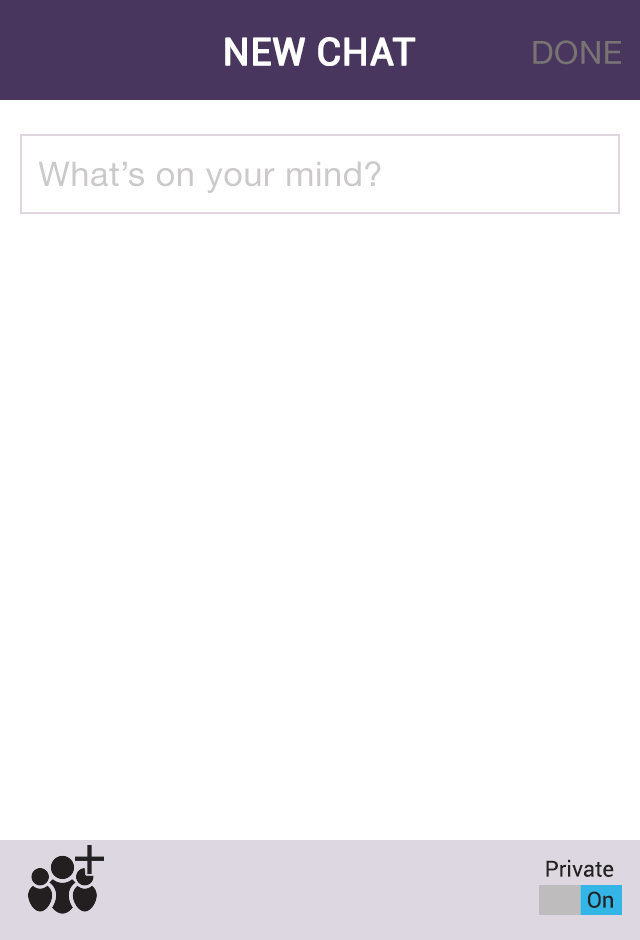
<style>
.page{position:relative;width:640px;height:940px;background:#ffffff}
.page>*{position:absolute;margin:0}
.t1{font:38px "Roboto-Regular";color:#ffffff;font-weight:bold}
.t2{font:32px "HelveticaNeue";letter-spacing:0.02em;color:#787474}
.t3{font:34px "HelveticaNeue";letter-spacing:0.02em;color:#cbc9c9}
.t4{font:22px "Roboto-Regular";color:#232121}
</style>
<div class="page">
<p class="t1" style="left:225px;top:37px;width:191px;height:29px">NEW CHAT</p>
<p class="t2" style="left:533px;top:40px;width:88px;height:25px">DONE</p>
<p class="t3" style="left:38px;top:161px;width:343px;height:32px">What’s on your mind?</p>
<p class="t4" style="left:546px;top:859px;width:68px;height:18px">Private</p>
<p class="t4" style="left:588px;top:891px;width:25px;height:17px">On</p>
</div>
